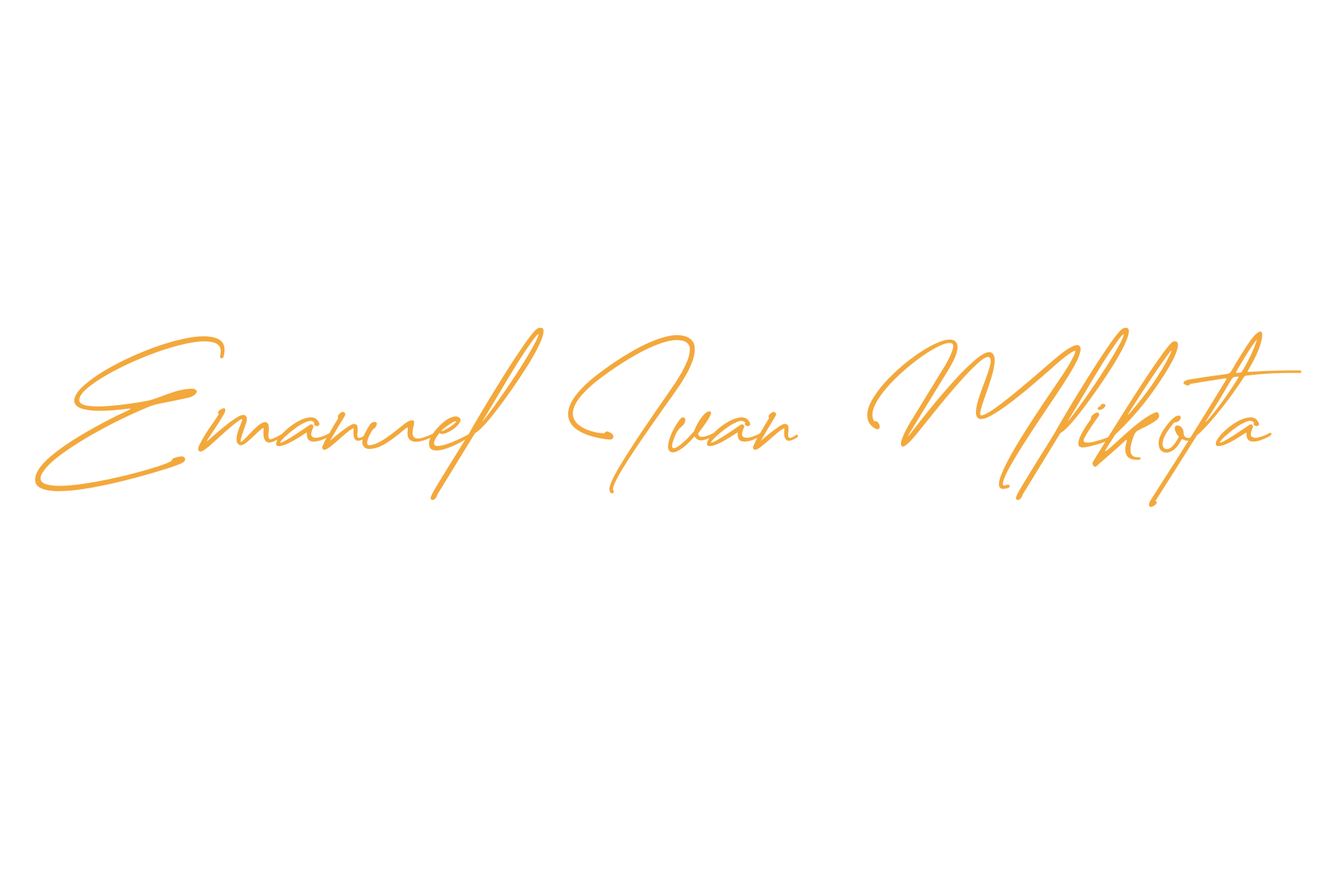
<style>
.page{position:relative;width:1337px;height:892px;background:#ffffff}
.page>*{position:absolute;margin:0}
.t1{font:187.6px "Creattion";color:#f3a83b}
</style>
<div class="page">
<p class="t1" style="left:35px;top:328px;width:1267px;height:179px">Emanuel   Ivan   Mlikota</p>
</div>
